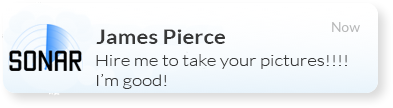
<style>
.page{position:relative;width:393px;height:108px}
.page>*{position:absolute;margin:0}
.t1{font:19.1px "Lato-Bold";color:#383838;scale:1.16 1}
.t2{font:16px "Lato-Light";color:#383838;scale:1.17 1}
</style>
<div class="page">
<p class="t1" style="left:96px;top:29px;width:129px;height:15px">James Pierce</p>
<p class="t2" style="left:96px;top:54px;width:251px;height:35px">Hire me to take your pictures!!!! <br>I’m good!</p>
</div>
